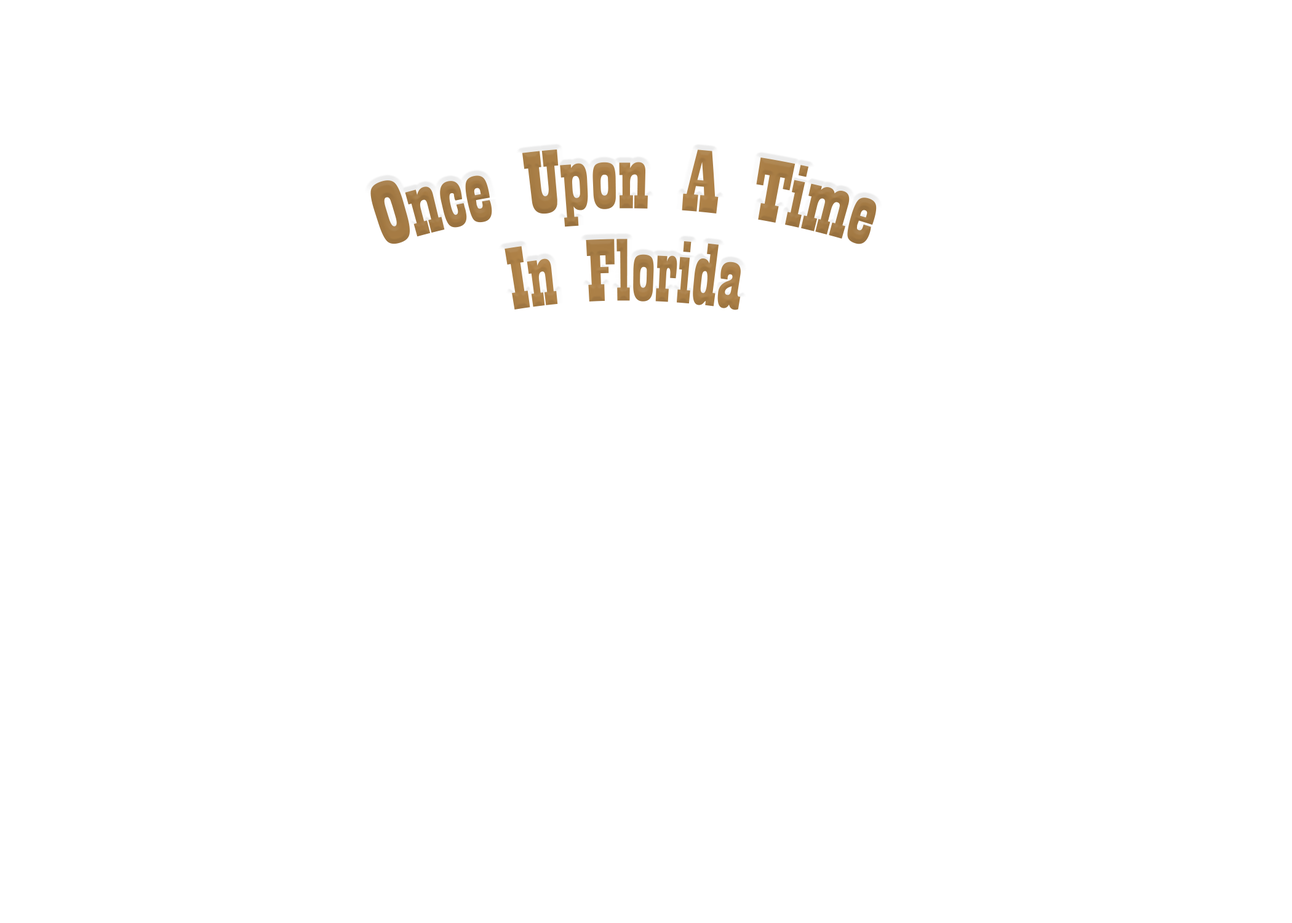
<style>
.page{position:relative;width:1292px;height:923px;background:#ffffff}
.page>*{position:absolute;margin:0}
.t1{font:92.3px/92.3px "Playbill";color:#a87d46}
</style>
<div class="page">
<p class="t1" style="left:370px;top:149px;width:507px;height:161px;text-align:center">Once Upon A Time<br>In Florida</p>
</div>
